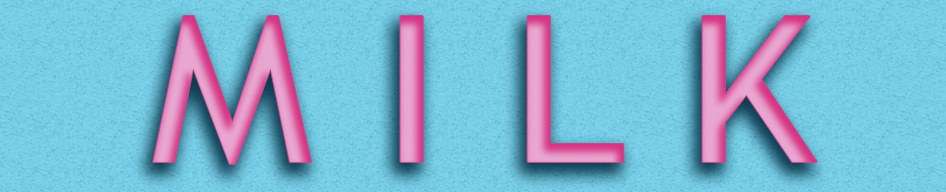
<style>
.page{position:relative;width:946px;height:192px}
.page>*{position:absolute;margin:0}
.t1{font:203.6px "TrebuchetMS";scale:1.11 1}
</style>
<div class="page">
<p class="t1" style="left:153px;top:16px;width:664px;height:148px">M I L K</p>
</div>
